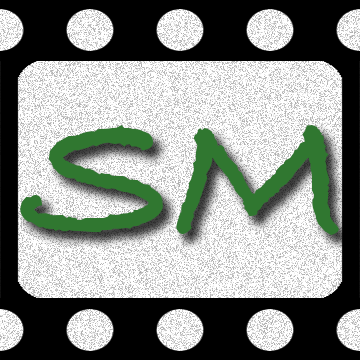
<style>
.page{position:relative;width:360px;height:360px;background:#000000}
.page>*{position:absolute;margin:0}
.t1{font:200px "BradleyHandITCTT-Bold";color:#307730}
</style>
<div class="page">
<p class="t1" style="left:20px;top:125px;width:319px;height:110px">SM</p>
</div>
